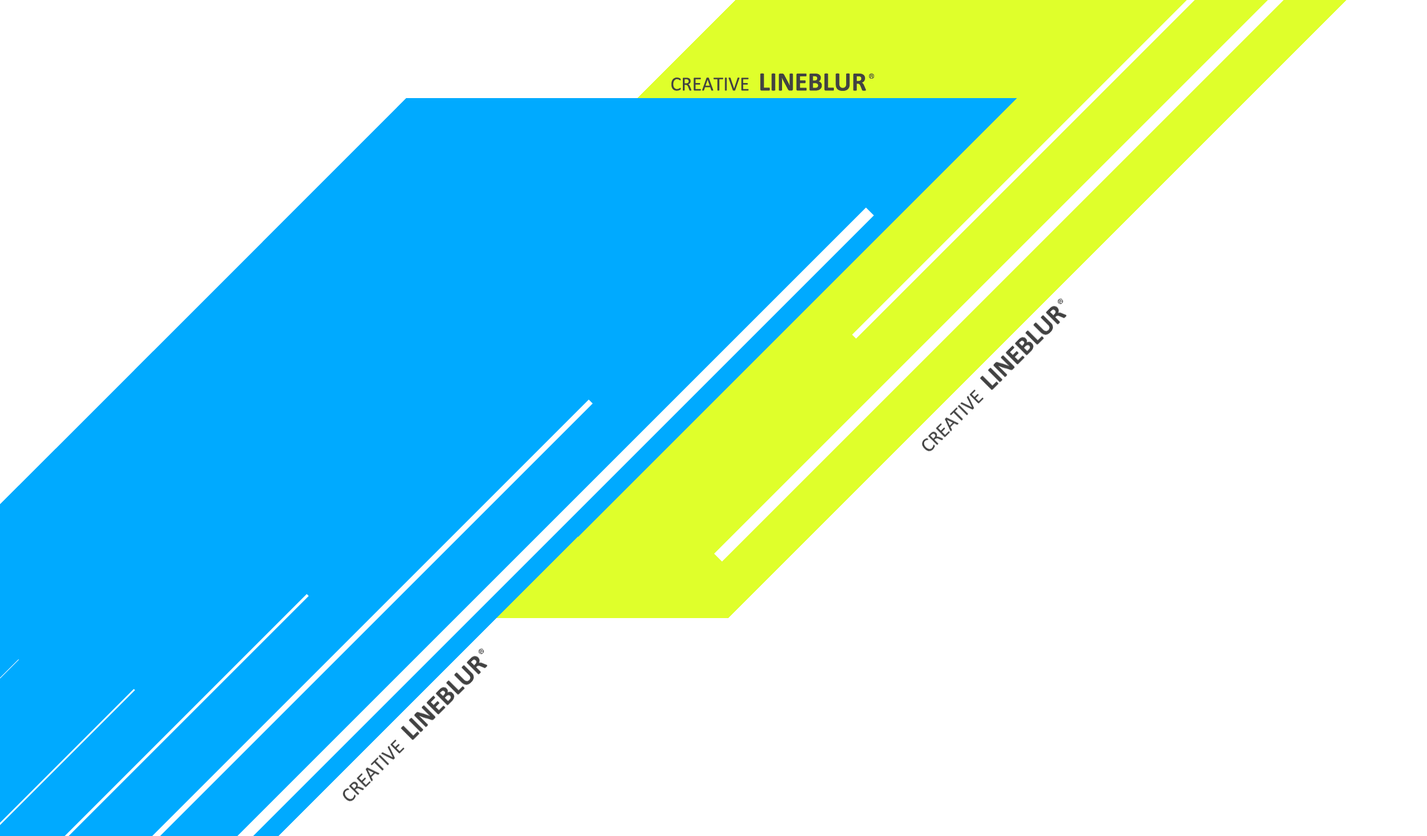
<style>
.page{position:relative;width:1427px;height:836px;background:#ffffff}
.page>*{position:absolute;margin:0}
.t1{font:20.1px "Calibri";color:#424242}
.t2{font:26.7px "Calibri-Bold";color:#424242}
.t3{font:6.7px "Gulim";color:#424242}
</style>
<div class="page">
<p class="t1" style="left:671px;top:77px;width:77px;height:14px">CREATIVE</p>
<p class="t2" style="left:760px;top:73px;width:106px;height:18px">LINEBLUR</p>
<p class="t3" style="left:869px;top:74px;width:5px;height:5px">®</p>
</div>
